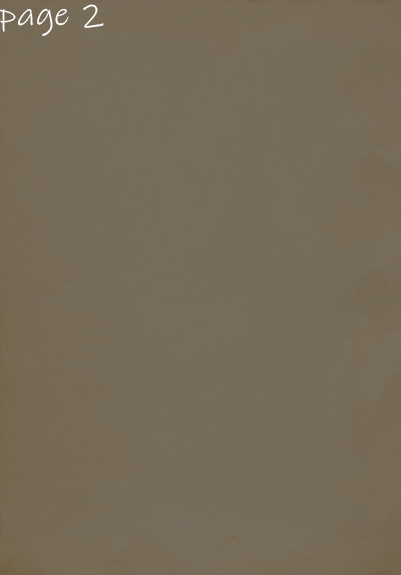
<style>
.page{position:relative;width:401px;height:575px}
.page>*{position:absolute;margin:0}
.t1{font:33px "InkFree";letter-spacing:0.025em;color:#ffffff}
</style>
<div class="page">
<p class="t1" style="left:0px;top:4px;width:104px;height:32px">page 2</p>
</div>
